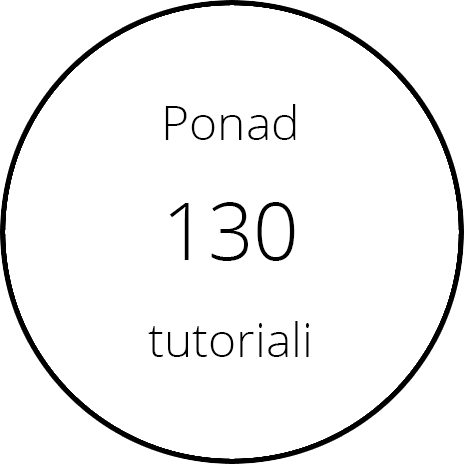
<style>
.page{position:relative;width:464px;height:464px;background:#ffffff}
.page>*{position:absolute;margin:0}
.t1{font:48px/24px "OpenSans-Light";color:#000000}
.t2{font:80px/24px "OpenSans-Light";color:#000000}
</style>
<div class="page">
<p class="t1" style="left:148px;top:104px;width:161px;height:253px;text-align:center">Ponad<br><span class="t2"><br><br><br><br>130<br><br><br><br></span>tutoriali</p>
</div>
